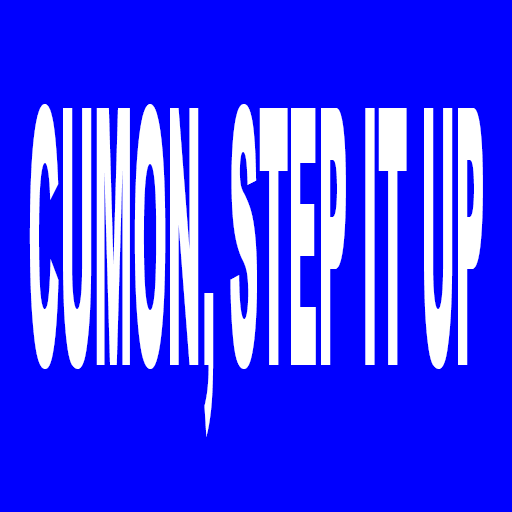
<style>
.page{position:relative;width:512px;height:512px;background:#0000ff}
.page>*{position:absolute;margin:0}
.t1{font:358.9px "Arial-Black";color:#ffffff;scale:0.11 1}
</style>
<div class="page">
<p class="t1" style="left:29px;top:104px;width:454px;height:333px">CUMON, STEP IT UP</p>
</div>
